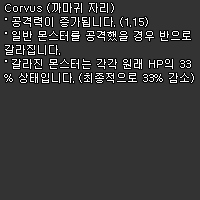
<style>
.page{position:relative;width:200px;height:200px;background:#333333}
.page>*{position:absolute;margin:0}
.t1{font:11px/14px "Dotum";color:#ffffff}
</style>
<div class="page">
<p class="t1" style="left:4px;top:3px;width:190px;height:80px">Corvus (까마귀 자리)<br>˚ 공격력이 증가됩니다. (1.15)<br>˚ 일반 몬스터를 공격했을 경우 반으로<br>갈라집니다.<br>˚ 갈라진 몬스터는 각각 원래 HP의 33<br>% 상태입니다. (최종적으로 33% 감소)</p>
</div>
